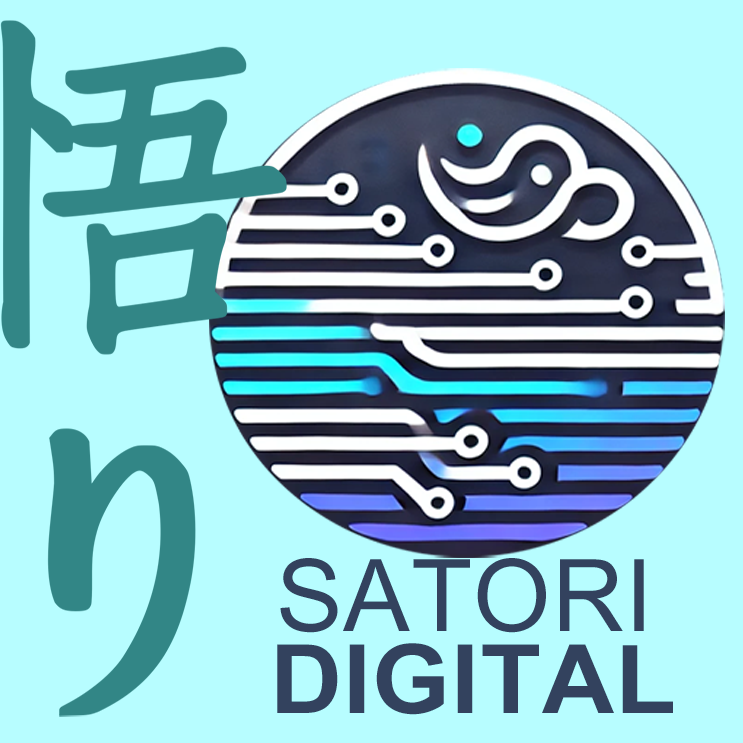
<style>
.page{position:relative;width:743px;height:743px;background:#b7fdff}
.page>*{position:absolute;margin:0}
.t1{font:100px "ArialMT";letter-spacing:0.01em;color:#33425e;text-transform:uppercase}
.t2{font:95.4px "Arial-BoldMT";letter-spacing:0.01em;color:#33425e;text-transform:uppercase;scale:1.05 1}
</style>
<div class="page">
<p class="t1" style="left:280px;top:558px;width:364px;height:75px">Satori</p>
<p class="t2" style="left:277px;top:643px;width:396px;height:72px">Digital</p>
</div>
